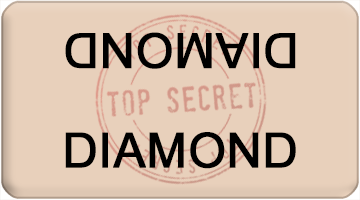
<style>
.page{position:relative;width:360px;height:200px;background:#e8d0bb}
.page>*{position:absolute;margin:0}
.t1{font:48px "ArialMT";color:#000000;font-weight:bold}
</style>
<div class="page">
<p class="t1" style="left:65px;top:32px;width:231px;height:37px;rotate:180deg">DIAMOND</p>
<p class="t1" style="left:65px;top:132px;width:231px;height:37px">DIAMOND</p>
</div>
